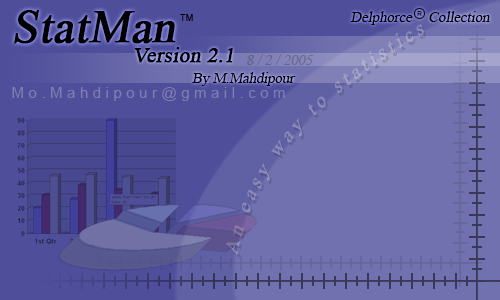
<style>
.page{position:relative;width:500px;height:300px;background:#7171af}
.page>*{position:absolute;margin:0}
.t1{font:45.8px "TimesNewRomanPSMT";color:#000000;font-weight:bold;font-style:italic}
.t2{font:9.3px "ArialMT";color:#000000}
.t3{font:14.7px "TimesNewRomanPSMT";color:#000000;font-style:italic}
.t4{font:6.4px "ArialMT";color:#111122}
.t5{font:21px "TimesNewRomanPSMT";color:#000000;font-weight:bold;font-style:italic}
.t6{font:14.6px "TimesNewRomanPSMT";color:#686893;font-style:italic}
.t7{font:14.6px "TimesNewRomanPSMT";color:#000000;font-style:italic}
.t8{font:15px "ArialMT";letter-spacing:0.3em;color:#7d7db2}
</style>
<div class="page">
<p class="t1" style="left:14px;top:10px;width:162px;height:34px">StatMan</p>
<p class="t2" style="left:180px;top:14px;width:13px;height:7px">TM</p>
<p class="t3" style="left:350px;top:11px;width:63px;height:14px">Delphorce</p>
<p class="t4" style="left:417px;top:11px;width:5px;height:6px">R</p>
<p class="t3" style="left:429px;top:11px;width:61px;height:11px">Collection</p>
<p class="t5" style="left:134px;top:47px;width:99px;height:16px">Version 2.1</p>
<p class="t6" style="left:247px;top:54px;width:67px;height:11px">8 / 2 / 2005</p>
<p class="t7" style="left:192px;top:72px;width:104px;height:14px">By M.Mahdipour</p>
<p class="t8" style="left:12px;top:87px;width:273px;height:14px">Mo.Mahdipour@gmail.com</p>
</div>
